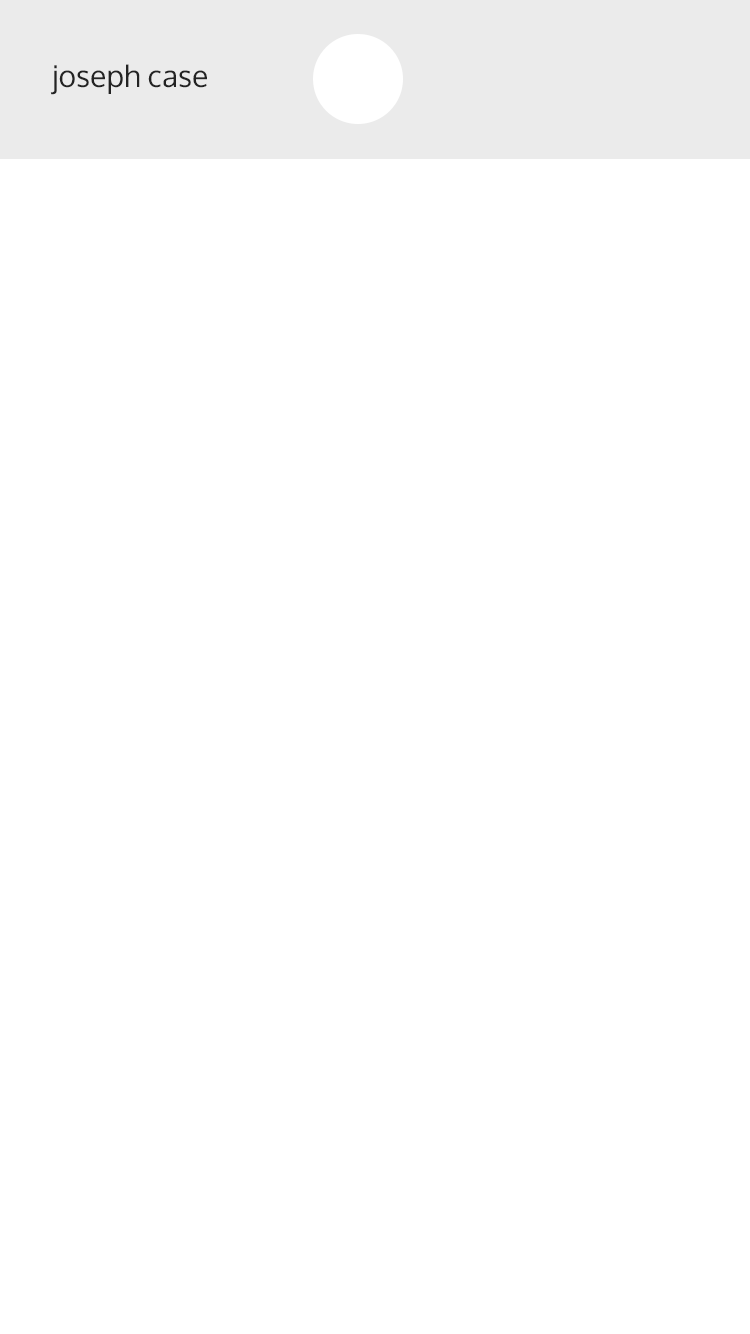
<style>
.page{position:relative;width:750px;height:1334px;background:#ffffff}
.page>*{position:absolute;margin:0}
.t1{font:30px "Oxygen-Regular";color:#232323}
</style>
<div class="page">
<p class="t1" style="left:50px;top:64px;width:157px;height:31px">joseph case</p>
</div>
